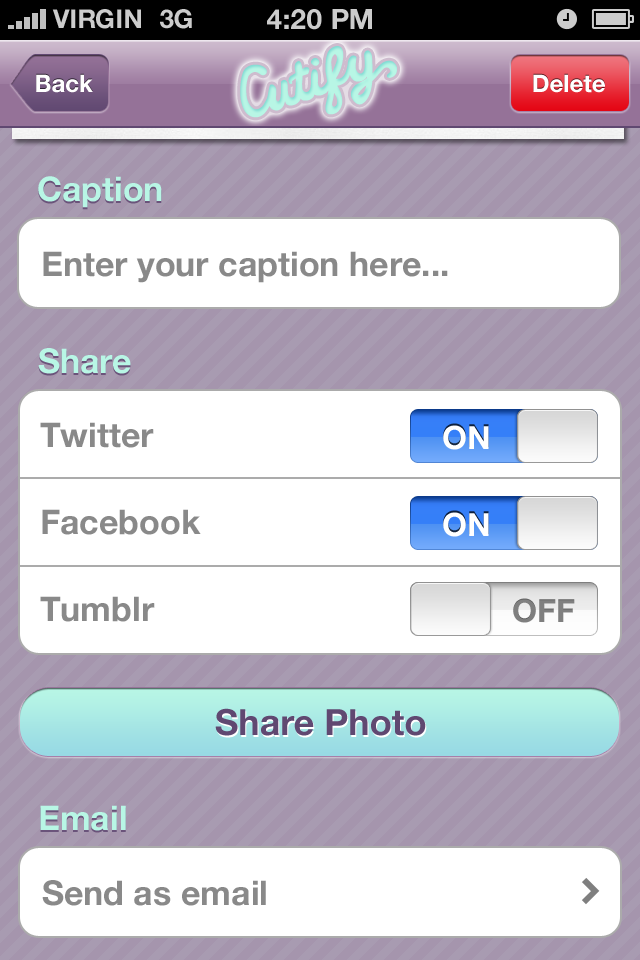
<style>
.page{position:relative;width:640px;height:960px;background:#ffffff}
.page>*{position:absolute;margin:0}
.t1{font:26px "HelveticaNeue-Bold";color:#cccccc;text-transform:uppercase}
.t2{font:28px "HelveticaNeue-Bold";color:#cccccc;text-transform:uppercase}
.t3{font:24px "HelveticaNeue-Bold";color:#ffffff}
.t4{font:34px "HelveticaNeue-Bold";color:#b8f6e5}
.t5{font:34px "HelveticaNeue-Bold";color:#898989}
.t6{font:34px/87px "HelveticaNeue-Bold";color:#898989}
.t7{font:32px "HelveticaNeue-Bold";color:#ffffff}
.t8{font:32px "HelveticaNeue-Bold";color:#7f7f7f}
.t9{font:36px "HelveticaNeue-Bold";color:#604871}
</style>
<div class="page">
<p class="t1" style="left:52px;top:9px;width:89px;height:20px">VIRGIN</p>
<p class="t1" style="left:160px;top:9px;width:32px;height:20px">3G</p>
<p class="t2" style="left:267px;top:9px;width:105px;height:21px">4:20 pM</p>
<p class="t3" style="left:36px;top:74px;width:57px;height:19px">Back</p>
<p class="t3" style="left:533px;top:74px;width:72px;height:19px">Delete</p>
<p class="t4" style="left:38px;top:176px;width:124px;height:32px">Caption</p>
<p class="t5" style="left:43px;top:251px;width:405px;height:32px">Enter your caption here...</p>
<p class="t4" style="left:38px;top:348px;width:93px;height:26px">Share</p>
<p class="t6" style="left:40px;top:422px;width:161px;height:200px">Twitter<br>Facebook<br>Tumblr</p>
<p class="t7" style="left:443px;top:425px;width:46px;height:25px">ON</p>
<p class="t7" style="left:443px;top:512px;width:46px;height:25px">ON</p>
<p class="t8" style="left:513px;top:598px;width:62px;height:25px">OFF</p>
<p class="t9" style="left:215px;top:708px;width:211px;height:28px">Share Photo</p>
<p class="t4" style="left:40px;top:805px;width:86px;height:26px">Email</p>
<p class="t5" style="left:42px;top:880px;width:224px;height:26px">Send as email</p>
</div>
